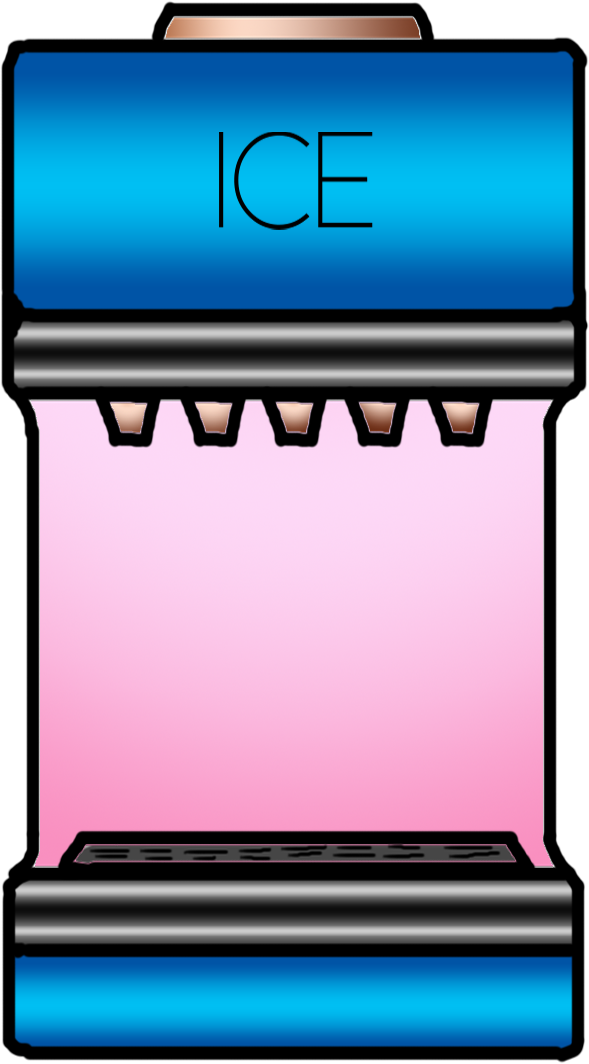
<style>
.page{position:relative;width:589px;height:1064px}
.page>*{position:absolute;margin:0}
.t1{font:136.6px "Generica";color:#000000;scale:0.92 1}
</style>
<div class="page">
<p class="t1" style="left:219px;top:132px;width:154px;height:98px">ICE</p>
</div>
